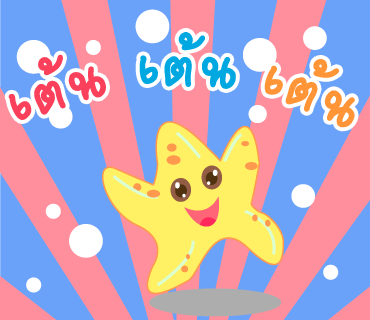
<style>
.page{position:relative;width:370px;height:320px;background:#6ba2f9}
.page>*{position:absolute;margin:0}
.t1{font:87px "2005_iannnnnMTV";letter-spacing:0.025em;color:#00a8e1;scale:1.06 1}
.t2{font:87px "2005_iannnnnMTV";letter-spacing:0.025em;color:#fa405a;scale:1.06 1}
.t3{font:87px "2005_iannnnnMTV";letter-spacing:0.025em;color:#ff9537;scale:1.06 1}
</style>
<div class="page">
<p class="t1" style="left:139px;top:32px;width:97px;height:57px;rotate:1deg">เต้น</p>
<p class="t2" style="left:8px;top:54px;width:98px;height:66px;rotate:-19deg">เต้น</p>
<p class="t3" style="left:264px;top:59px;width:91px;height:69px;rotate:22deg">เต้น</p>
</div>
